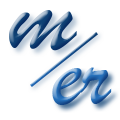
<style>
.page{position:relative;width:120px;height:120px;background:#ffffff}
.page>*{position:absolute;margin:0}
.t1{font:120px "BrushScriptMT";color:#104376}
.t2{font:100px "BrushScriptMT";color:#2771bb}
</style>
<div class="page">
<p class="t1" style="left:9px;top:10px;width:68px;height:41px">m</p>
<p class="t2" style="left:52px;top:67px;width:60px;height:38px">er</p>
</div>
